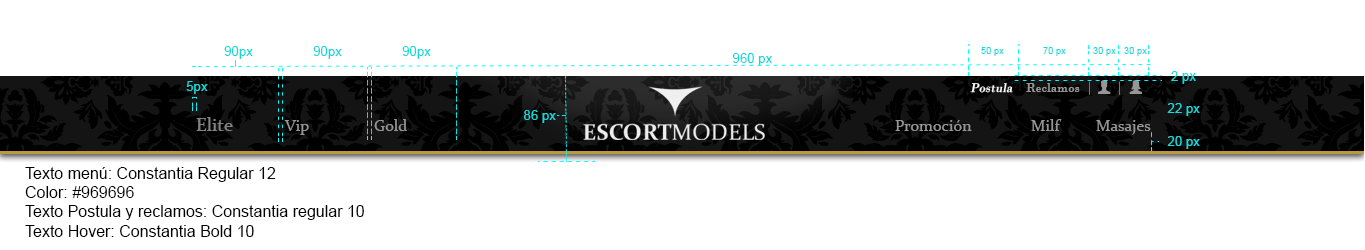
<style>
.page{position:relative;width:1365px;height:250px;background:#ffffff}
.page>*{position:absolute;margin:0}
.t1{font:13.3px "ArialMT";color:#17d8d8}
.t2{font:9.3px "ArialMT";color:#17d8d8}
.t3{font:13.5px "ArialMT";color:#17d8d8}
.t4{font:12px "ArialMT";color:#000000}
</style>
<div class="page">
<p class="t1" style="left:224px;top:46px;width:29px;height:13px">90px</p>
<p class="t1" style="left:313px;top:46px;width:29px;height:13px">90px</p>
<p class="t1" style="left:402px;top:46px;width:29px;height:13px">90px</p>
<p class="t1" style="left:732px;top:53px;width:41px;height:13px">960 px</p>
<p class="t2" style="left:981px;top:47px;width:23px;height:9px">50 px</p>
<p class="t2" style="left:1043px;top:47px;width:23px;height:9px">70 px</p>
<p class="t2" style="left:1093px;top:47px;width:23px;height:9px">30 px</p>
<p class="t2" style="left:1124px;top:47px;width:23px;height:9px">30 px</p>
<p class="t3" style="left:1171px;top:71px;width:25px;height:13px">2 px</p>
<p class="t1" style="left:186px;top:81px;width:22px;height:13px">5px</p>
<p class="t1" style="left:524px;top:110px;width:32px;height:13px">86 px</p>
<p class="t1" style="left:1167px;top:103px;width:33px;height:13px">22 px</p>
<p class="t1" style="left:1167px;top:136px;width:33px;height:13px">20 px</p>
<p class="t4" style="left:25px;top:167px;width:339px;height:70px;text-align:justify">Texto menú: Constantia Regular 12<br>Color: #969696<br>Texto Postula y reclamos: Constantia regular 10<br>Texto Hover: Constantia Bold 10</p>
</div>
